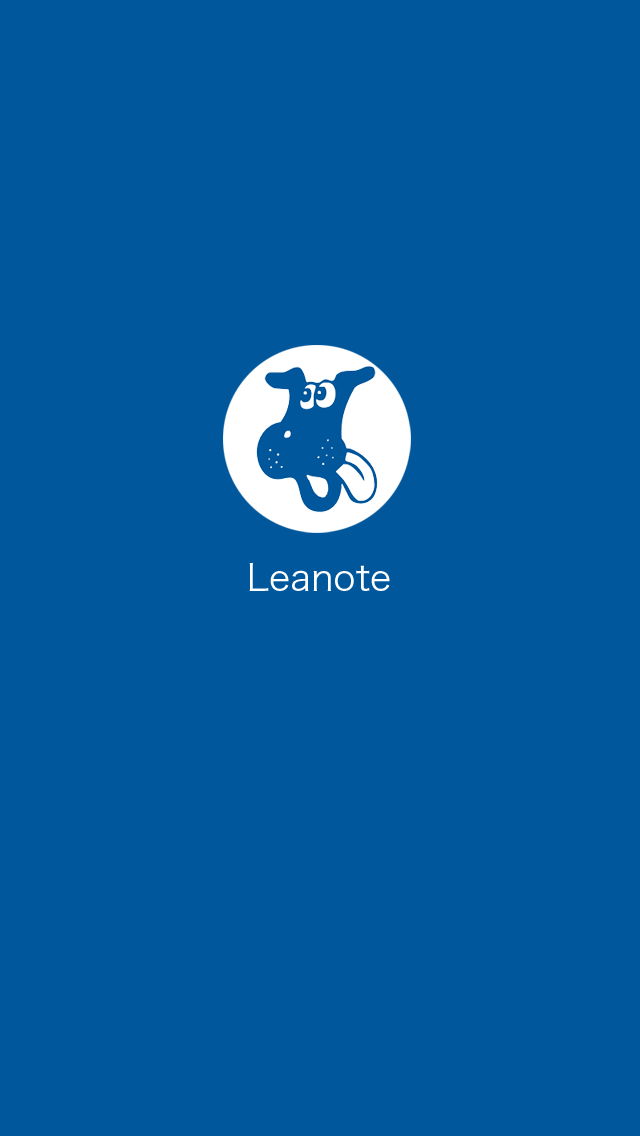
<style>
.page{position:relative;width:640px;height:1136px;background:#00579b}
.page>*{position:absolute;margin:0}
.t1{font:36px "HiraginoSansGB-W3";color:#ffffff}
</style>
<div class="page">
<p class="t1" style="left:249px;top:563px;width:141px;height:28px">Leanote</p>
</div>
